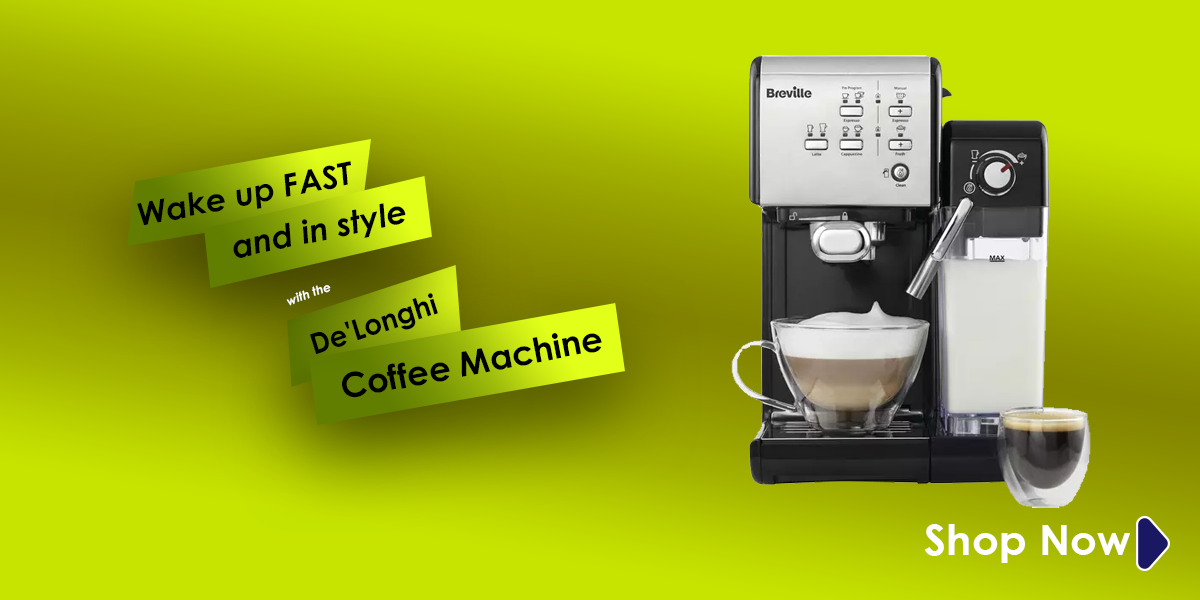
<style>
.page{position:relative;width:1200px;height:600px}
.page>*{position:absolute;margin:0}
.t1{font:31.2px "CenturyGothic-BoldItalic";color:#000000;scale:1.03 1}
.t2{font:32.3px "CenturyGothic-BoldItalic";color:#000000}
.t3{font:12.3px "CenturyGothic-BoldItalic";color:#ffffff}
.t4{font:28.7px "CenturyGothic-Bold";color:#000000}
.t5{font:34.1px "CenturyGothic-Bold";color:#000000}
.t6{font:42.4px "CenturyGothic-Bold";color:#ffffff}
</style>
<div class="page">
<p class="t1" style="left:137px;top:161px;width:214px;height:65px;rotate:-11deg">Wake up FAST</p>
<p class="t2" style="left:233px;top:203px;width:173px;height:55px;rotate:-12deg">and in style</p>
<p class="t3" style="left:286px;top:285px;width:45px;height:21px;rotate:-20deg">with the</p>
<p class="t4" style="left:310px;top:293px;width:128px;height:62px;rotate:-19deg">De'Longhi</p>
<p class="t5" style="left:342px;top:333px;width:260px;height:65px;rotate:-11deg">Coffee Machine</p>
<p class="t6" style="left:924px;top:524px;width:207px;height:39px">Shop Now</p>
</div>
